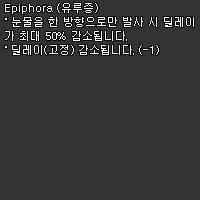
<style>
.page{position:relative;width:200px;height:200px;background:#333333}
.page>*{position:absolute;margin:0}
.t1{font:11px/14px "Dotum";color:#ffffff}
</style>
<div class="page">
<p class="t1" style="left:5px;top:3px;width:189px;height:52px">Epiphora (유루증)<br>˚ 눈물을 한 방향으로만 발사 시 딜레이<br>가 최대 50% 감소됩니다.<br>˚ 딜레이(고정) 감소됩니다. (-1)</p>
</div>
